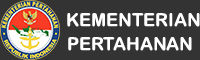
<style>
.page{position:relative;width:200px;height:60px;background:#333333}
.page>*{position:absolute;margin:0}
.t1{font:18px "ArialRoundedMTBold";color:#fefefe}
.t2{font:18px "ArialRoundedMTBold";color:#ffffff}
</style>
<div class="page">
<p class="t1" style="left:67px;top:13px;width:133px;height:14px">KEMENTERIAN</p>
<p class="t2" style="left:68px;top:37px;width:124px;height:14px">PERTAHANAN</p>
</div>
